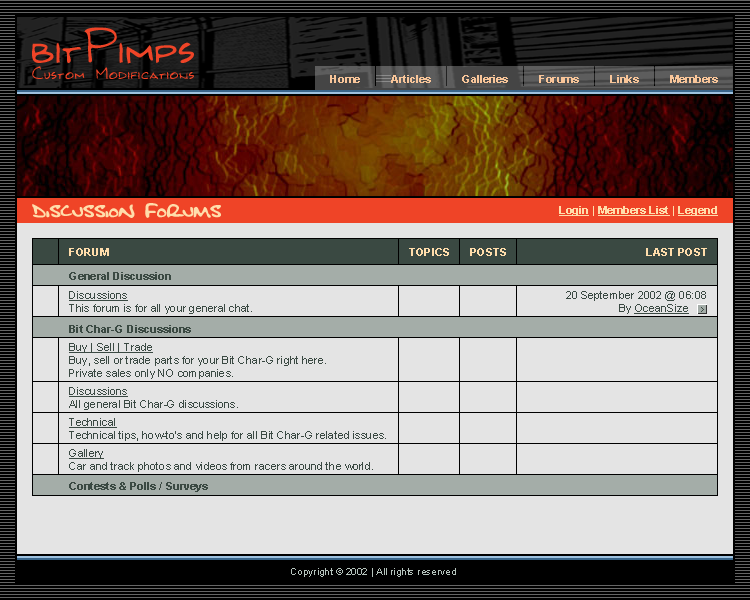
<style>
.page{position:relative;width:750px;height:600px;background:#e4e4e4}
.page>*{position:absolute;margin:0}
.t1{font:11px "Arial-BoldMT";color:#ffddab;text-decoration:underline}
.t2{font:11px "Arial-BoldMT";color:#ffddab}
.t3{font:11px "Arial-BoldMT";color:#3a4942}
.t4{font:11px "ArialMT";color:#3a4942}
.t5{font:11px "ArialMT";color:#3a4942;text-decoration:underline}
</style>
<div class="page">
<p class="t1" style="left:559px;top:206px;width:159px;height:10px">Login<span class="t2"> | </span>Members List<span class="t2"> | </span>Legend</p>
<p class="t2" style="left:69px;top:248px;width:40px;height:8px">FORUM</p>
<p class="t2" style="left:409px;top:248px;width:40px;height:8px">TOPICS</p>
<p class="t2" style="left:470px;top:248px;width:36px;height:8px">POSTS</p>
<p class="t2" style="left:646px;top:248px;width:61px;height:8px">LAST POST</p>
<p class="t3" style="left:69px;top:272px;width:102px;height:8px">General Discussion</p>
<p class="t4" style="left:69px;top:291px;width:183px;height:23px"><span class="t5">Discussions<br></span>This forum is for all your general chat.</p>
<p class="t4" style="left:566px;top:291px;width:140px;height:23px;text-align:right">20 September 2002 @ 06:08<br>By <span class="t5">OceanSize</span></p>
<p class="t3" style="left:69px;top:325px;width:122px;height:8px">Bit Char-G Discussions</p>
<p class="t4" style="left:69px;top:343px;width:257px;height:36px"><span class="t5">Buy | Sell | Trade<br></span>Buy, sell or trade parts for your Bit Char-G right here.<br>Private sales only NO companies.</p>
<p class="t4" style="left:69px;top:387px;width:169px;height:23px"><span class="t5">Discussions<br></span>All general Bit Char-G discussions.</p>
<p class="t4" style="left:69px;top:418px;width:317px;height:23px"><span class="t5">Technical<br></span>Technical tips, how-to's and help for all Bit Char-G related issues.</p>
<p class="t4" style="left:69px;top:449px;width:304px;height:23px"><span class="t5">Gallery<br></span>Car and track photos and videos from racers around the world.</p>
<p class="t3" style="left:69px;top:482px;width:139px;height:10px">Contests &amp; Polls / Surveys</p>
</div>
